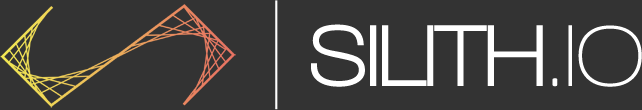
<style>
.page{position:relative;width:642px;height:110px;background:#333333}
.page>*{position:absolute;margin:0}
.t1{font:89.4px "WalkwayUltraBold";color:#ffffff}
.t2{font:89.4px "WalkwayBold";color:#ffffff}
.t3{font:89.4px "WalkwaySemiBold";color:#ffffff}
</style>
<div class="page">
<p class="t1" style="left:311px;top:24px;width:331px;height:63px">SILITH<span class="t2">.</span><span class="t3">IO</span></p>
</div>
